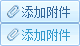
<style>
.page{position:relative;width:80px;height:46px}
.page>*{position:absolute;margin:0}
.t1{font:12px "SimSun";letter-spacing:0.015em;color:#336699}
.t2{font:12px "SimSun";letter-spacing:0.015em;color:#3399cc}
</style>
<div class="page">
<p class="t1" style="left:22px;top:6px;width:48px;height:12px">添加附件</p>
<p class="t2" style="left:22px;top:29px;width:48px;height:12px">添加附件</p>
</div>
